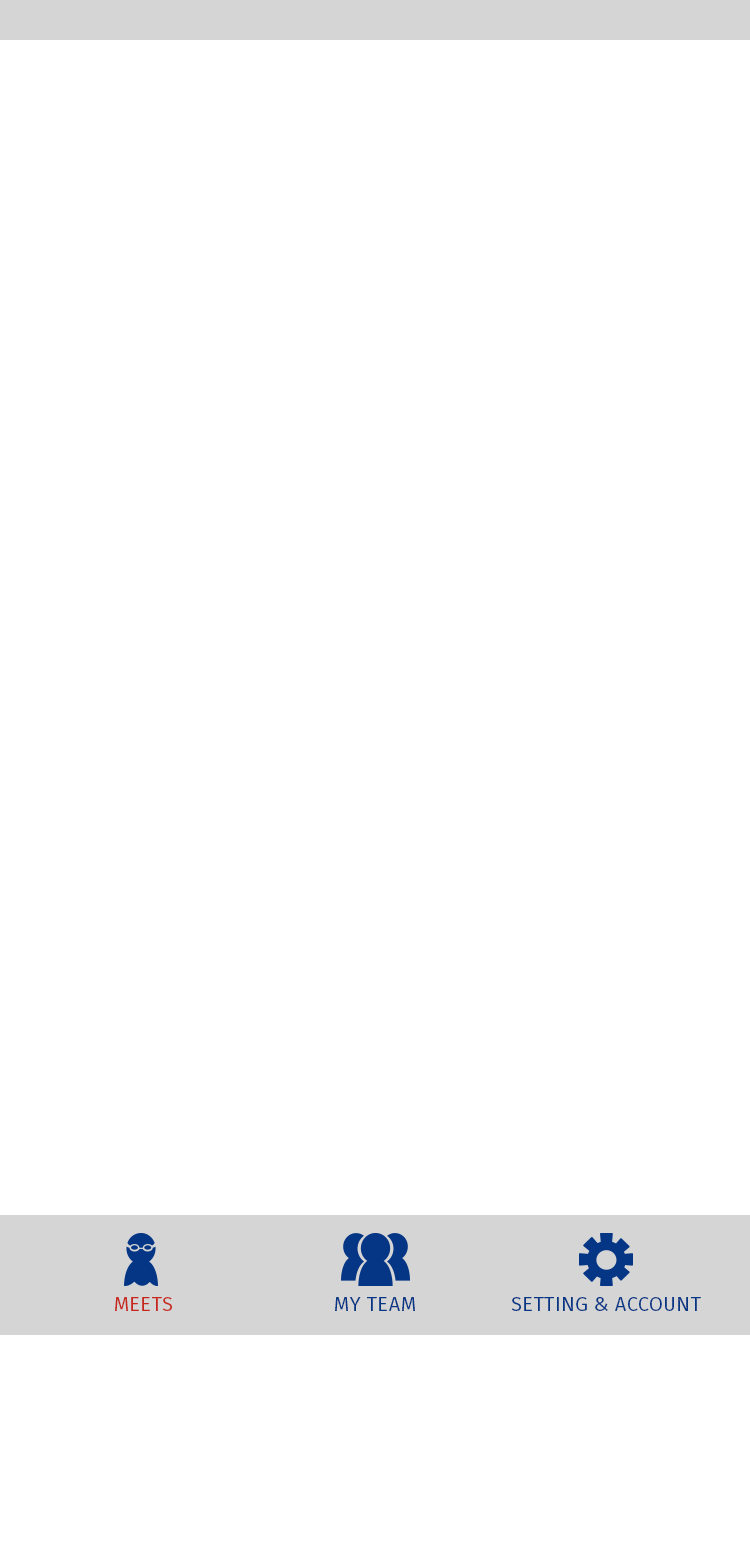
<style>
.page{position:relative;width:750px;height:1556px;background:#ffffff}
.page>*{position:absolute;margin:0}
.t1{font:20px "FiraSans-Book";letter-spacing:0.02em;color:#c7271b;text-transform:uppercase}
.t2{font:20px "FiraSans-Book";letter-spacing:0.02em;color:#053685;text-transform:uppercase}
</style>
<div class="page">
<p class="t1" style="left:115px;top:1297px;width:57px;height:14px">Meets</p>
<p class="t2" style="left:335px;top:1297px;width:80px;height:14px">My Team</p>
<p class="t2" style="left:511px;top:1297px;width:190px;height:14px">Setting &amp; Account</p>
</div>
